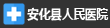
<style>
.page{position:relative;width:110px;height:28px;background:#333333}
.page>*{position:absolute;margin:0}
.t1{font:13.3px "MicrosoftYaHei-Bold";color:#fefefe;scale:0.87 1}
</style>
<div class="page">
<p class="t1" style="left:27px;top:7px;width:82px;height:14px">安化县人民医院</p>
</div>
